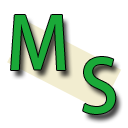
<style>
.page{position:relative;width:128px;height:128px;background:#ffffff}
.page>*{position:absolute;margin:0}
.t1{font:72px "KozGoPro-Medium";color:#1aa938}
</style>
<div class="page">
<p class="t1" style="left:11px;top:15px;width:55px;height:55px">M</p>
<p class="t1" style="left:83px;top:57px;width:33px;height:57px">S</p>
</div>
